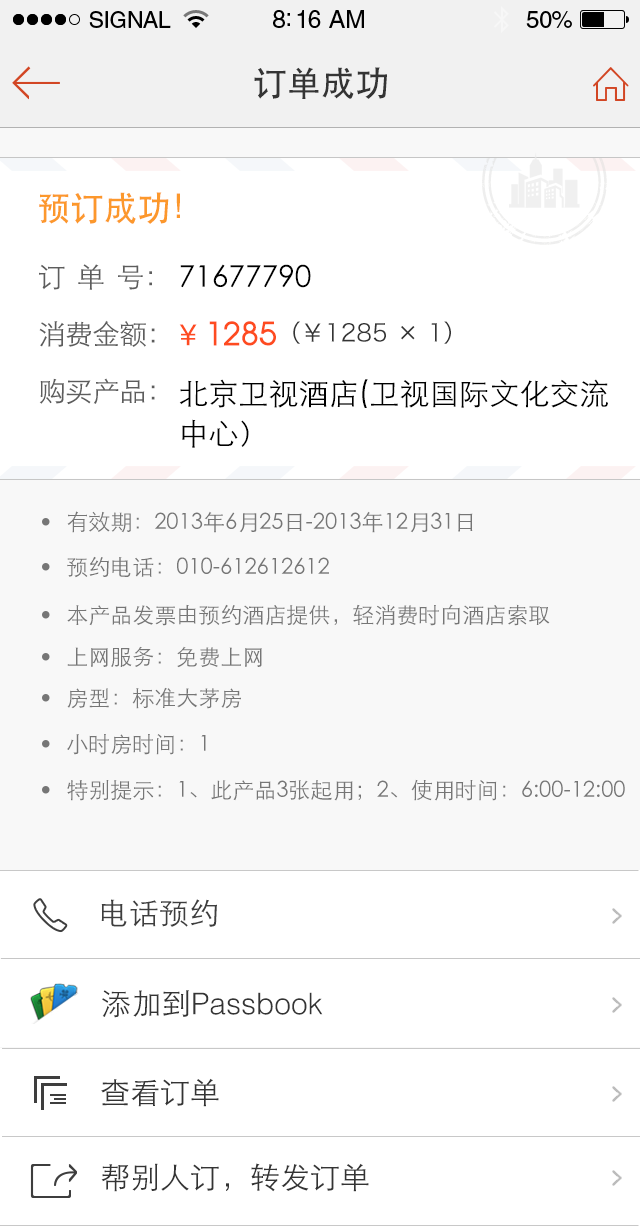
<style>
.page{position:relative;width:640px;height:1226px;background:#ffffff}
.page>*{position:absolute;margin:0}
.t1{font:34px "STHeitiSC-Medium";color:#343434}
.t2{font:34px "STHeitiSC-Medium";color:#fc982c}
.t3{font:28px/57.1px "STHeitiSC-Light";letter-spacing:-0.03em;color:#5d5d5d}
.t4{font:30px/40px "STHeitiSC-Light";color:#000000}
.t5{font:30px/66px "STHeitiSC-Light";color:#000000}
.t6{font:30px "STHeitiSC-Medium";color:#fe4b20}
.t7{font:32px "AtillaNormal";color:#fe4b20;font-weight:bold}
.t8{font:24px "HiraginoSansGB-W3";color:#343434}
.t9{font:22px "STHeitiSC-Light";color:#767676}
.t10{font:30px "STHeitiSC-Light";color:#3e3e3e}
.t11{font:30px "Helvetica-Light";color:#343434}
.t12{font:30px "STHeitiSC-Light";color:#343434}
</style>
<div class="page">
<p class="t1" style="left:254px;top:67px;width:133px;height:32px">订单成功</p>
<p class="t2" style="left:39px;top:192px;width:141px;height:32px">预订成功！</p>
<p class="t3" style="left:39px;top:264px;width:116px;height:141px">订  单  号：<br>消费金额：<br>购买产品：</p>
<p class="t4" style="left:179px;top:264px;width:429px;height:184px"><span class="t5">71677790<br><br></span>北京卫视酒店(卫视国际文化交流<br>中心）</p>
<p class="t6" style="left:179px;top:324px;width:18px;height:22px">￥</p>
<p class="t7" style="left:209px;top:321px;width:67px;height:25px">1285</p>
<p class="t8" style="left:293px;top:321px;width:158px;height:23px">（￥1285 × 1）</p>
<p class="t9" style="left:67px;top:511px;width:406px;height:22px">有效期：2013年6月25日-2013年12月31日</p>
<p class="t9" style="left:67px;top:556px;width:262px;height:22px">预约电话：010-612612612</p>
<p class="t9" style="left:67px;top:604px;width:483px;height:22px">本产品发票由预约酒店提供，轻消费时向酒店索取</p>
<p class="t9" style="left:67px;top:646px;width:195px;height:22px">上网服务：免费上网</p>
<p class="t9" style="left:67px;top:687px;width:174px;height:22px">房型：标准大茅房</p>
<p class="t9" style="left:67px;top:734px;width:139px;height:21px">小时房时间：1</p>
<p class="t9" style="left:67px;top:779px;width:558px;height:22px">特别提示：1、此产品3张起用；2、使用时间：6:00-12:00</p>
<p class="t10" style="left:101px;top:899px;width:116px;height:28px">电话预约</p>
<p class="t11" style="left:102px;top:990px;width:221px;height:28px"><span class="t12">添加到</span>Passbook</p>
<p class="t12" style="left:101px;top:1078px;width:118px;height:29px">查看订单</p>
<p class="t12" style="left:101px;top:1163px;width:268px;height:29px">帮别人订，转发订单</p>
</div>
